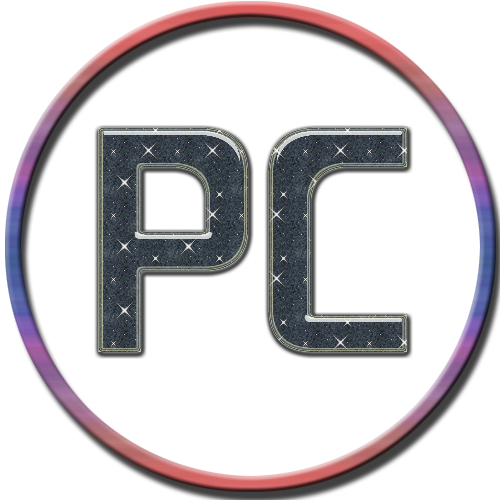
<style>
.page{position:relative;width:500px;height:500px;background:#ffffff}
.page>*{position:absolute;margin:0}
.t1{font:277.1px "FZHZGBJW--GB1-0"}
</style>
<div class="page">
<p class="t1" style="left:98px;top:127px;width:309px;height:225px">PC</p>
</div>
